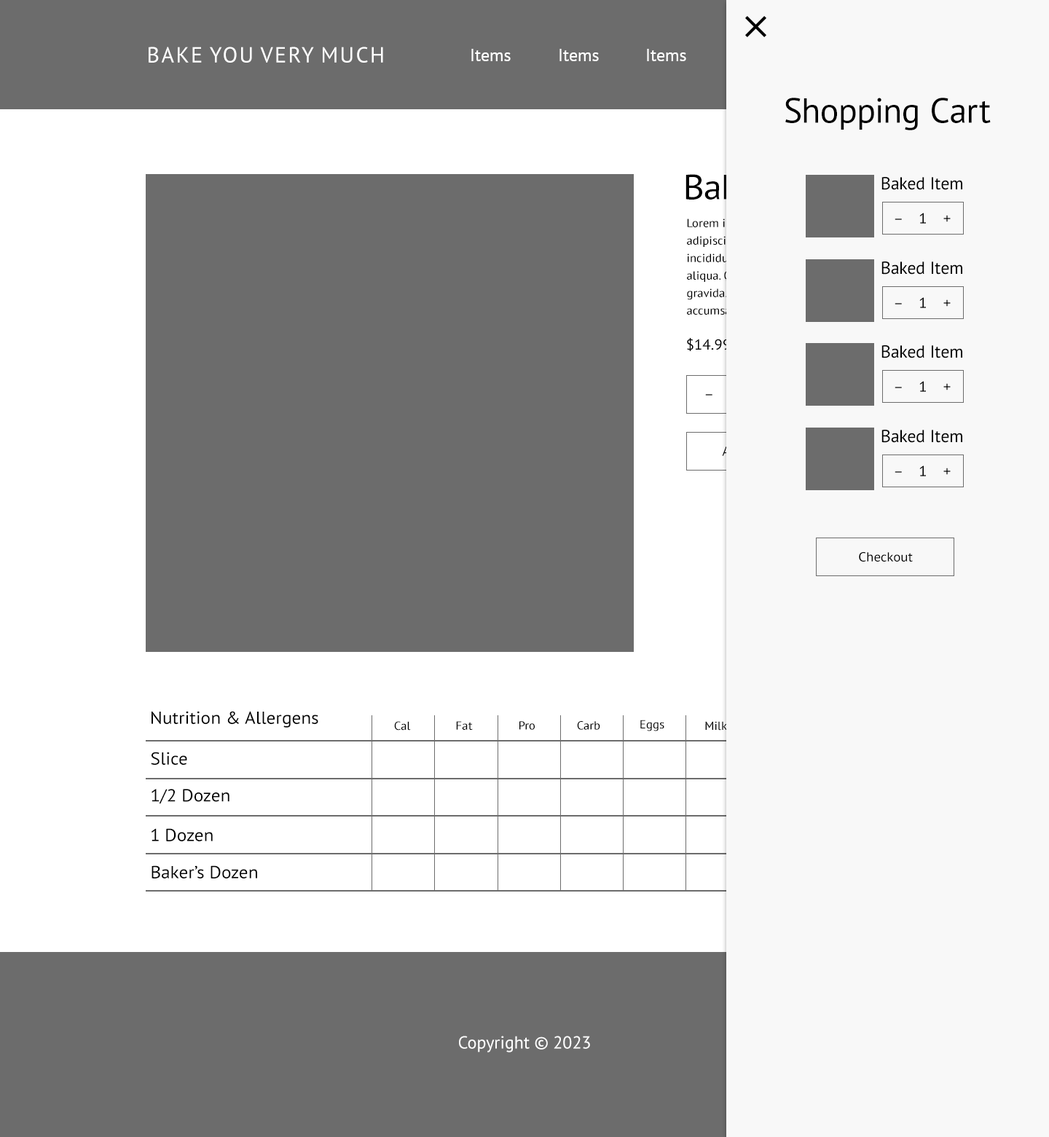
<style>
.page{position:relative;width:1049px;height:1137px;background:#6c6c6c}
.page>*{position:absolute;margin:0}
.t1{font:21.9px "PTSans-Regular";color:#ffffff;text-transform:uppercase}
.t2{font:17.5px "PTSans-Regular";color:#ffffff}
.t3{font:35px "PTSans-Regular";color:#000000}
.t4{font:35px "PTSans-Regular";letter-spacing:-0.02em;scale:1.05 1}
.t5{font:17.5px "PTSans-Regular";color:#000000}
.t6{font:14.6px "PTSans-Regular";color:#000000;scale:1.05 1}
.t7{font:14.6px "PTSans-Regular";scale:1.05 1}
.t8{font:13.1px "PTSans-Regular";color:#000000;scale:1.05 1}
.t9{font:17.5px "PTSans-Regular";color:#000000;scale:1.05 1}
.t10{font:11.7px "PTSans-Regular";color:#000000;scale:1.05 1}
</style>
<div class="page">
<p class="t1" style="left:149px;top:47px;width:234px;height:16px">Bake you very much</p>
<p class="t2" style="left:471px;top:49px;width:40px;height:12px">Items</p>
<p class="t2" style="left:559px;top:49px;width:40px;height:12px">Items</p>
<p class="t2" style="left:647px;top:49px;width:39px;height:12px">Items</p>
<p class="t3" style="left:785px;top:98px;width:206px;height:32px">Shopping Cart</p>
<p class="t4" style="left:685px;top:174px;width:165px;height:26px">Baked Item</p>
<p class="t5" style="left:881px;top:177px;width:81px;height:13px">Baked Item</p>
<p class="t6" style="left:894px;top:213px;width:56px;height:11px">–    1    +</p>
<p class="t5" style="left:881px;top:261px;width:81px;height:14px">Baked Item</p>
<p class="t6" style="left:894px;top:297px;width:56px;height:11px">–    1    +</p>
<p class="t7" style="left:687px;top:338px;width:75px;height:13px">$14.99 USD</p>
<p class="t5" style="left:881px;top:345px;width:81px;height:13px">Baked Item</p>
<p class="t6" style="left:894px;top:381px;width:56px;height:11px">–    1    +</p>
<p class="t5" style="left:881px;top:430px;width:81px;height:13px">Baked Item</p>
<p class="t6" style="left:894px;top:465px;width:56px;height:11px">–    1    +</p>
<p class="t8" style="left:859px;top:552px;width:54px;height:10px">Checkout</p>
<p class="t9" style="left:151px;top:711px;width:167px;height:17px">Nutrition &amp; Allergens</p>
<p class="t10" style="left:394px;top:721px;width:17px;height:10px">Cal</p>
<p class="t10" style="left:456px;top:721px;width:17px;height:9px">Fat</p>
<p class="t10" style="left:519px;top:721px;width:16px;height:9px">Pro</p>
<p class="t10" style="left:577px;top:721px;width:23px;height:9px">Carb</p>
<p class="t10" style="left:640px;top:720px;width:24px;height:11px">Eggs</p>
<p class="t10" style="left:705px;top:721px;width:22px;height:10px">Milk</p>
<p class="t9" style="left:151px;top:752px;width:36px;height:13px">Slice</p>
<p class="t9" style="left:151px;top:789px;width:78px;height:15px">1/2 Dozen</p>
<p class="t9" style="left:151px;top:828px;width:62px;height:13px">1 Dozen</p>
<p class="t9" style="left:151px;top:865px;width:106px;height:13px">Baker’s Dozen</p>
<p class="t2" style="left:459px;top:1036px;width:131px;height:16px">Copyright © 2023</p>
</div>
